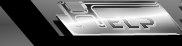
<style>
.page{position:relative;width:182px;height:46px;background:#000000}
.page>*{position:absolute;margin:0}
.t1{font:20px "Ethnocentric";letter-spacing:0.2em;scale:0.77 1}
</style>
<div class="page">
<p class="t1" style="left:104px;top:17px;width:50px;height:11px">ELP</p>
</div>
